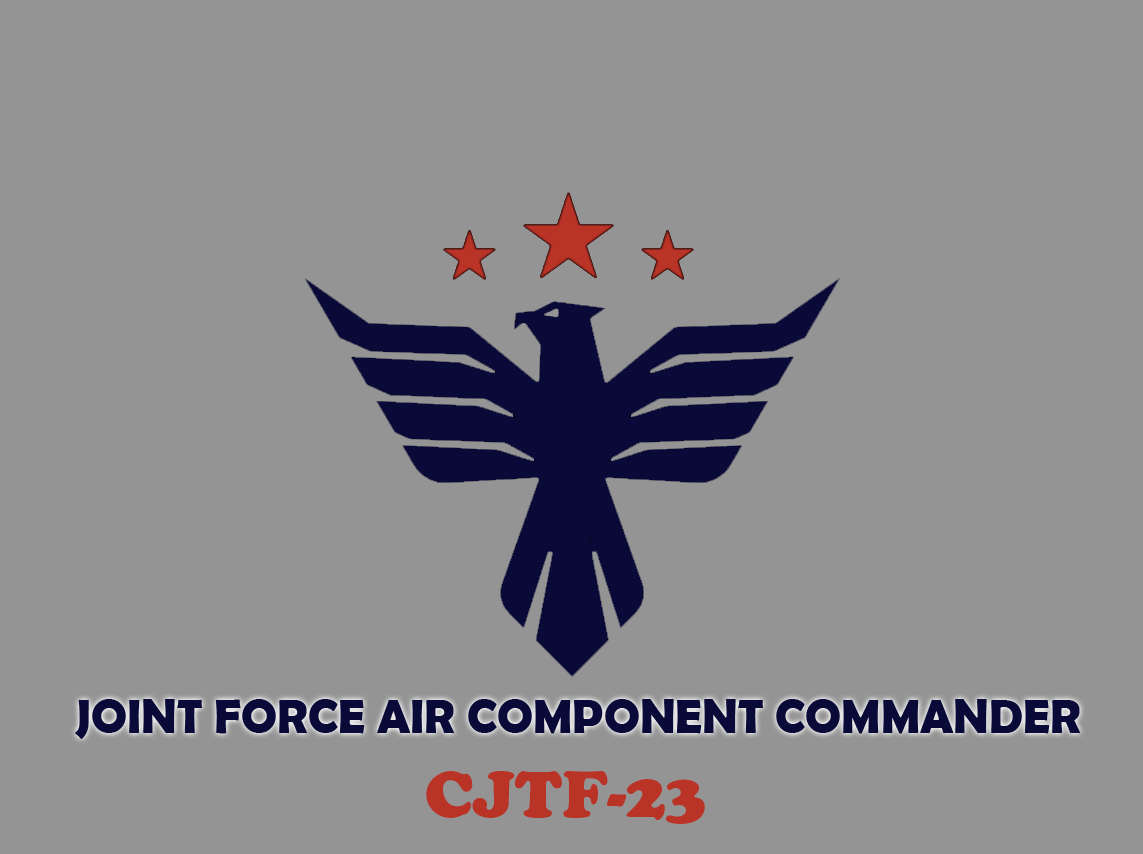
<style>
.page{position:relative;width:1143px;height:854px;background:#949495}
.page>*{position:absolute;margin:0}
.t1{font:48px "BerlinSansFBDemi-Bold";color:#0a0a38}
.t2{font:64px "CooperBlackStd";color:#ba3327}
</style>
<div class="page">
<p class="t1" style="left:75px;top:699px;width:1006px;height:40px">JOINT FORCE AIR COMPONENT COMMANDER</p>
<p class="t2" style="left:426px;top:771px;width:279px;height:53px">CJTF-23</p>
</div>
